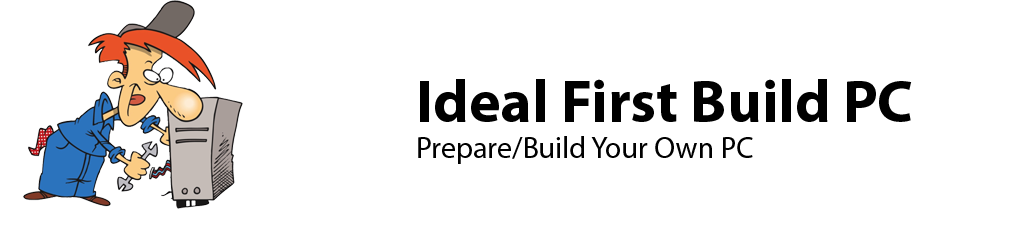
<style>
.page{position:relative;width:1024px;height:240px;background:#ffffff}
.page>*{position:absolute;margin:0}
.t1{font:30px "MyriadPro-Regular";color:#000000}
.t2{font:60px "MyriadPro-Bold";color:#000000}
</style>
<div class="page">
<p class="t1" style="left:418px;top:79px;width:494px;height:85px"><span class="t2">Ideal First Build PC<br></span>Prepare/Build Your Own PC</p>
</div>
